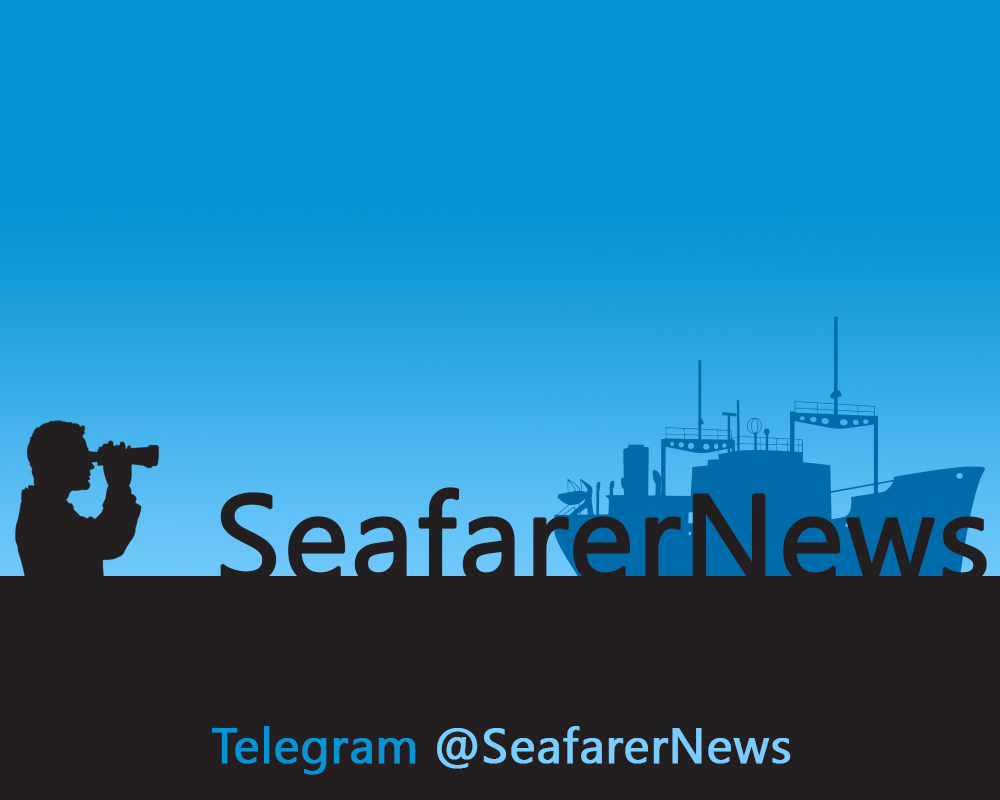
<style>
.page{position:relative;width:1000px;height:800px;background:#231f20}
.page>*{position:absolute;margin:0}
.t1{font:123px "SegoeUISymbol";color:#231f20;font-weight:bold}
.t2{font:49px "SegoeUISymbol";color:#7acdff;font-weight:bold}
.t3{font:49px "SegoeUISymbol";color:#0694d4;font-weight:bold}
</style>
<div class="page">
<p class="t1" style="left:220px;top:487px;width:767px;height:97px">SeafarerNews</p>
<p class="t2" style="left:212px;top:726px;width:579px;height:49px"><span class="t3">Telegram </span>@SeafarerNews</p>
</div>
